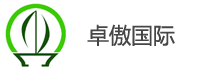
<style>
.page{position:relative;width:207px;height:72px;background:#ffffff}
.page>*{position:absolute;margin:0}
.t1{font:22px "MicrosoftYaHei";color:#464646}
</style>
<div class="page">
<p class="t1" style="left:87px;top:24px;width:88px;height:23px">卓傲国际</p>
</div>
